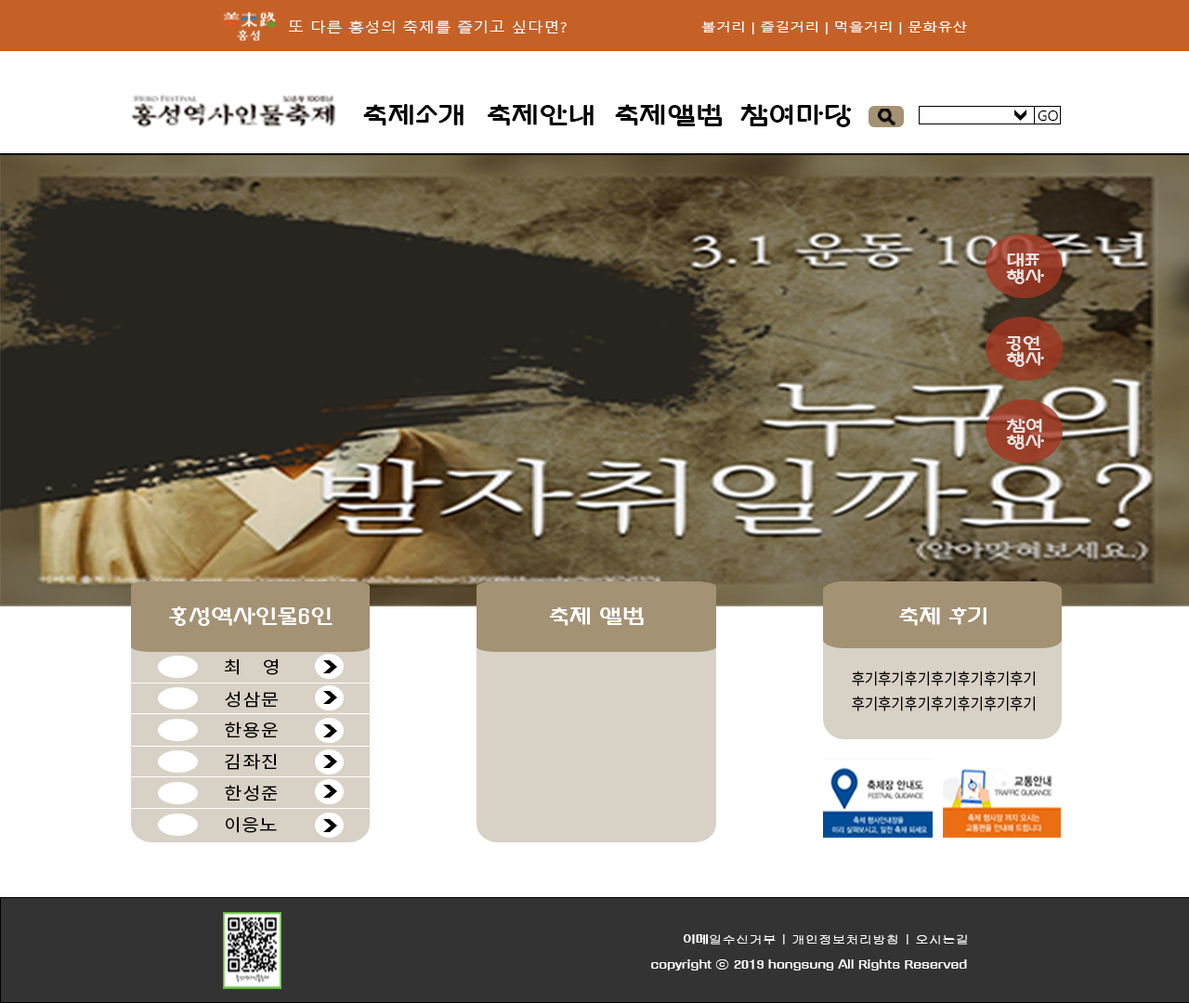
<style>
.page{position:relative;width:1189px;height:1003px;background:#ffffff}
.page>*{position:absolute;margin:0}
.t1{font:13.6px "MalgunGothic";color:#ffffff;scale:1.19 1}
.t2{font:11.8px "MalgunGothic";color:#ffffff;scale:1.26 1}
.t3{font:24px "Gugi-Regular";color:#000000;scale:1.19 1}
.t4{font:14.2px "MalgunGothic";color:#000000}
.t5{font:16px/16px "Gugi-Regular";color:#ede2e0;scale:1.2 1}
.t6{font:16px/16px "Gugi-Regular";color:#ede1e0;scale:1.2 1}
.t7{font:20.3px "Gugi-Regular";color:#ffffff;scale:1.14 1}
.t8{font:20.6px "Gugi-Regular";color:#ffffff;scale:1.13 1}
.t9{font:17.1px "NotoSansKR-Regular";letter-spacing:0.04em;color:#000000;scale:1.12 1}
.t10{font:15.6px "NotoSansKR-Regular";color:#000000;scale:0.92 1}
.t11{font:17.1px "NotoSansKR-Regular";color:#000000;scale:1.12 1}
.t12{font:11.1px "Gulim";color:#ffffff;scale:1.21 1}
.t13{font:11.1px "Gugi-Regular";color:#ffffff;scale:1.21 1}
</style>
<div class="page">
<p class="t1" style="left:288px;top:20px;width:279px;height:14px">또 다른 홍성의 축제를 즐기고 싶다면?</p>
<p class="t2" style="left:701px;top:21px;width:266px;height:13px">볼거리 | 즐길거리 | 먹을거리 | 문화유산</p>
<p class="t3" style="left:363px;top:104px;width:100px;height:22px">축제소개</p>
<p class="t3" style="left:488px;top:104px;width:105px;height:22px">축제안내</p>
<p class="t3" style="left:615px;top:104px;width:107px;height:22px">축제앨범</p>
<p class="t3" style="left:740px;top:104px;width:112px;height:23px">참여마당</p>
<p class="t4" style="left:1037px;top:110px;width:21px;height:12px">GO</p>
<p class="t5" style="left:1006px;top:253px;width:38px;height:31px">대표<br>행사</p>
<p class="t6" style="left:1006px;top:336px;width:38px;height:31px">공연<br>행사</p>
<p class="t6" style="left:1006px;top:419px;width:38px;height:31px">참여<br>행사</p>
<p class="t7" style="left:169px;top:606px;width:163px;height:20px">홍성역사인물6인</p>
<p class="t8" style="left:549px;top:606px;width:95px;height:20px">축제 앨범</p>
<p class="t8" style="left:899px;top:607px;width:87px;height:19px">축제 후기</p>
<p class="t9" style="left:224px;top:658px;width:54px;height:17px">최    영</p>
<p class="t10" style="left:852px;top:671px;width:183px;height:15px">후기후기후기후기후기후기후기</p>
<p class="t9" style="left:225px;top:691px;width:54px;height:17px">성삼문</p>
<p class="t10" style="left:852px;top:696px;width:183px;height:15px">후기후기후기후기후기후기후기</p>
<p class="t9" style="left:225px;top:722px;width:53px;height:16px">한용운</p>
<p class="t9" style="left:225px;top:753px;width:52px;height:17px">김좌진</p>
<p class="t9" style="left:225px;top:785px;width:53px;height:17px">한성준</p>
<p class="t11" style="left:226px;top:816px;width:51px;height:17px">이응노</p>
<p class="t12" style="left:683px;top:934px;width:285px;height:11px"><span class="t13">이메</span>일수신거부 | 개인정보처리방침 | 오시는길</p>
<p class="t13" style="left:651px;top:959px;width:316px;height:12px">copyright <span class="t12">ⓒ </span>2019 hongsung All Rights Reserved</p>
</div>
